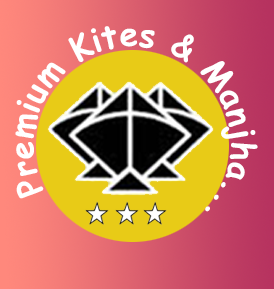
<style>
.page{position:relative;width:274px;height:289px}
.page>*{position:absolute;margin:0}
.t1{font:33.3px "ComicSansMS-Bold";color:#ffffff}
</style>
<div class="page">
<p class="t1" style="left:15px;top:26px;width:243px;height:186px;rotate:155deg">Premium Kites &amp; Manjha...</p>
</div>
